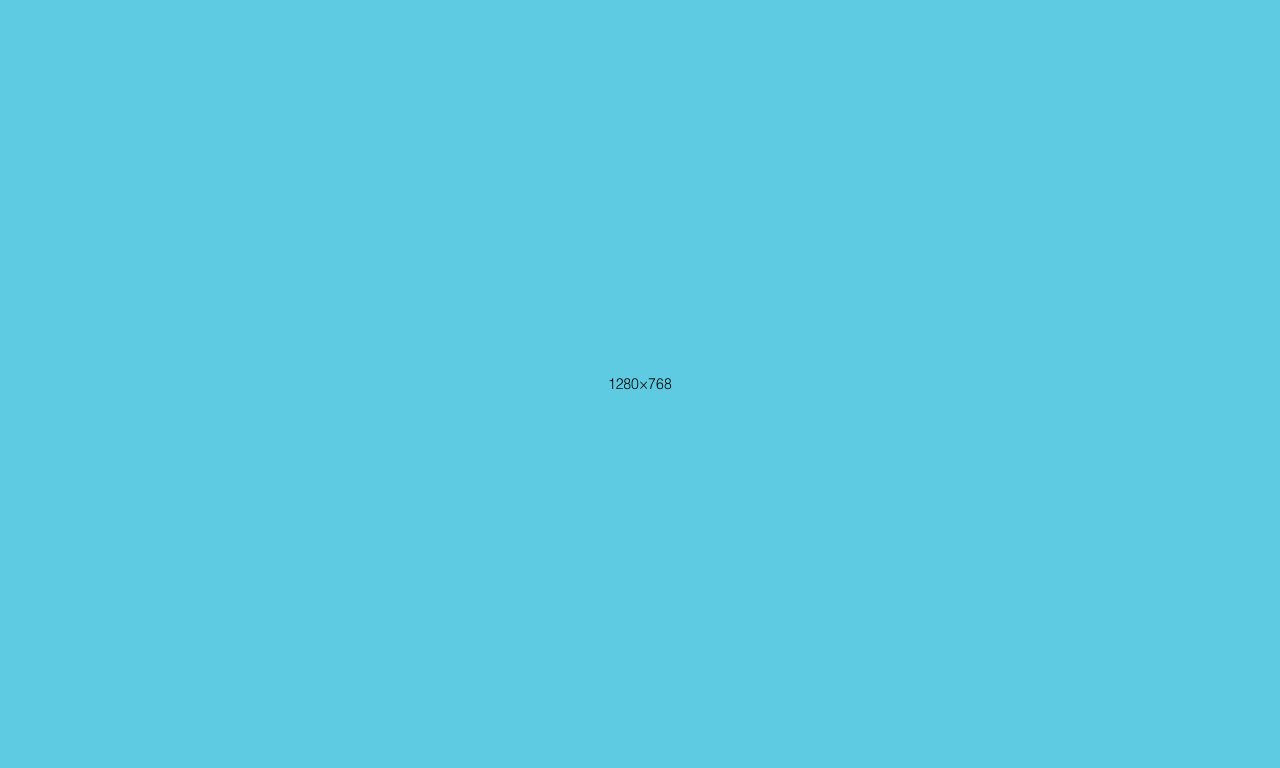
<style>
.page{position:relative;width:1280px;height:768px;background:#5fcbe2}
.page>*{position:absolute;margin:0}
.t1{font:14px "Helvetica-Light";color:#000000}
</style>
<div class="page">
<p class="t1" style="left:609px;top:378px;width:63px;height:12px">1280×768</p>
</div>
